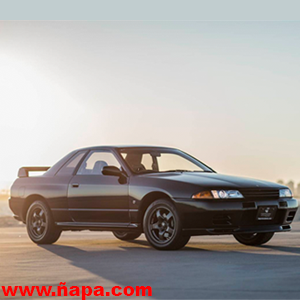
<style>
.page{position:relative;width:300px;height:300px}
.page>*{position:absolute;margin:0}
.t1{font:18px "Arial-Black";color:#ff0000}
</style>
<div class="page">
<p class="t1" style="left:1px;top:282px;width:151px;height:18px">www.ñapa.com</p>
</div>
